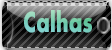
<style>
.page{position:relative;width:112px;height:50px}
.page>*{position:absolute;margin:0}
.t1{font:30px "Aharoni-Bold";color:#7aceb9;scale:0.74 1}
</style>
<div class="page">
<p class="t1" style="left:24px;top:10px;width:68px;height:23px">Calhas</p>
</div>
